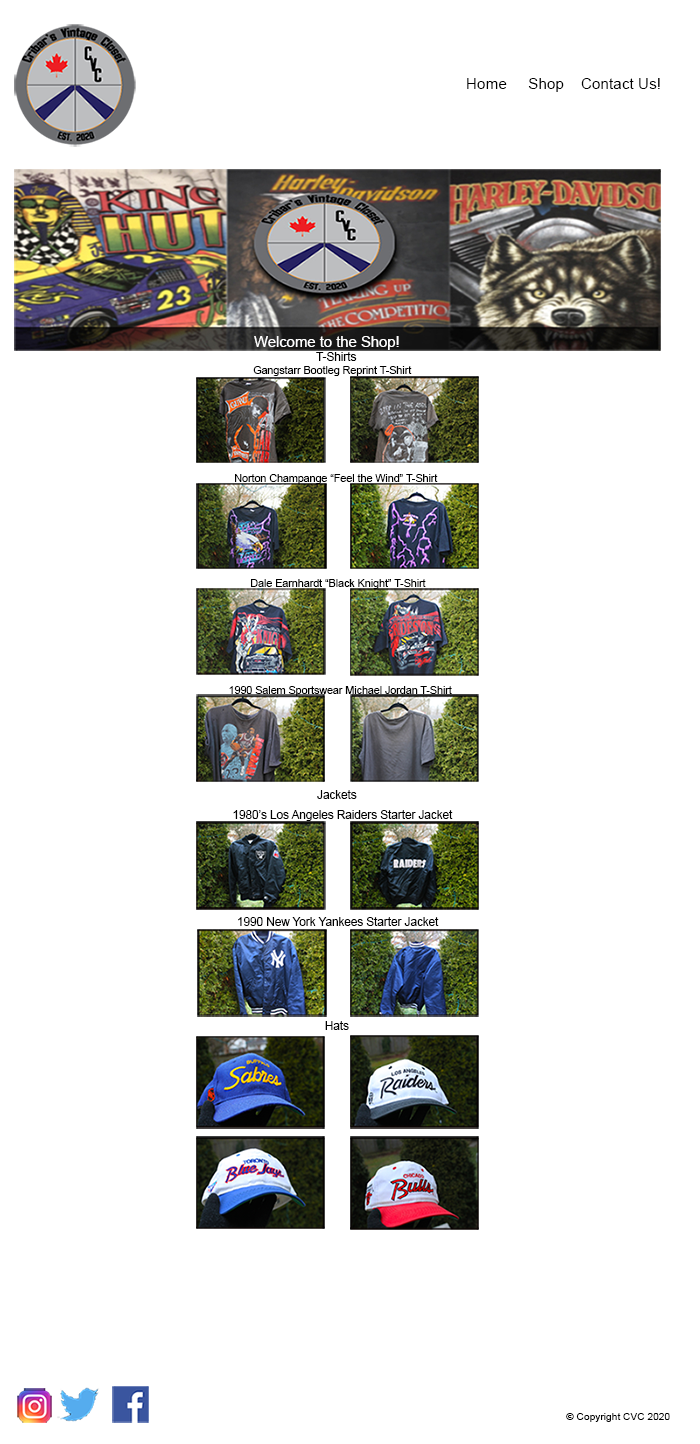
<style>
.page{position:relative;width:700px;height:1444px;background:#ffffff}
.page>*{position:absolute;margin:0}
.t1{font:15.3px "ArialMT";color:#000000}
.t2{font:14.9px "ArialMT";color:#ffffff}
.t3{font:11.7px "ArialMT";color:#000000}
.t4{font:10.7px "ArialMT";color:#000000}
.t5{font:10.2px "ArialMT";color:#000000}
</style>
<div class="page">
<p class="t1" style="left:467px;top:78px;width:193px;height:14px">Home     Shop    Contact Us!</p>
<p class="t2" style="left:254px;top:336px;width:145px;height:14px">Welcome to the Shop!</p>
<p class="t3" style="left:316px;top:352px;width:41px;height:9px">T-Shirts</p>
<p class="t4" style="left:253px;top:366px;width:159px;height:10px">Gangstarr Bootleg Reprint T-Shirt</p>
<p class="t4" style="left:235px;top:474px;width:203px;height:10px">Norton Champange “Feel the Wind” T-Shirt</p>
<p class="t4" style="left:251px;top:579px;width:175px;height:10px">Dale Earnhardt “Black Knight” T-Shirt</p>
<p class="t4" style="left:229px;top:686px;width:223px;height:10px">1990 Salem Sportswear Michael Jordan T-Shirt</p>
<p class="t3" style="left:317px;top:790px;width:40px;height:9px">Jackets</p>
<p class="t3" style="left:233px;top:810px;width:220px;height:11px">1980’s Los Angeles Raiders Starter Jacket</p>
<p class="t3" style="left:238px;top:917px;width:201px;height:9px">1990 New York Yankees Starter Jacket</p>
<p class="t3" style="left:325px;top:1021px;width:24px;height:9px">Hats</p>
<p class="t5" style="left:566px;top:1413px;width:104px;height:9px">© Copyright CVC 2020</p>
</div>
